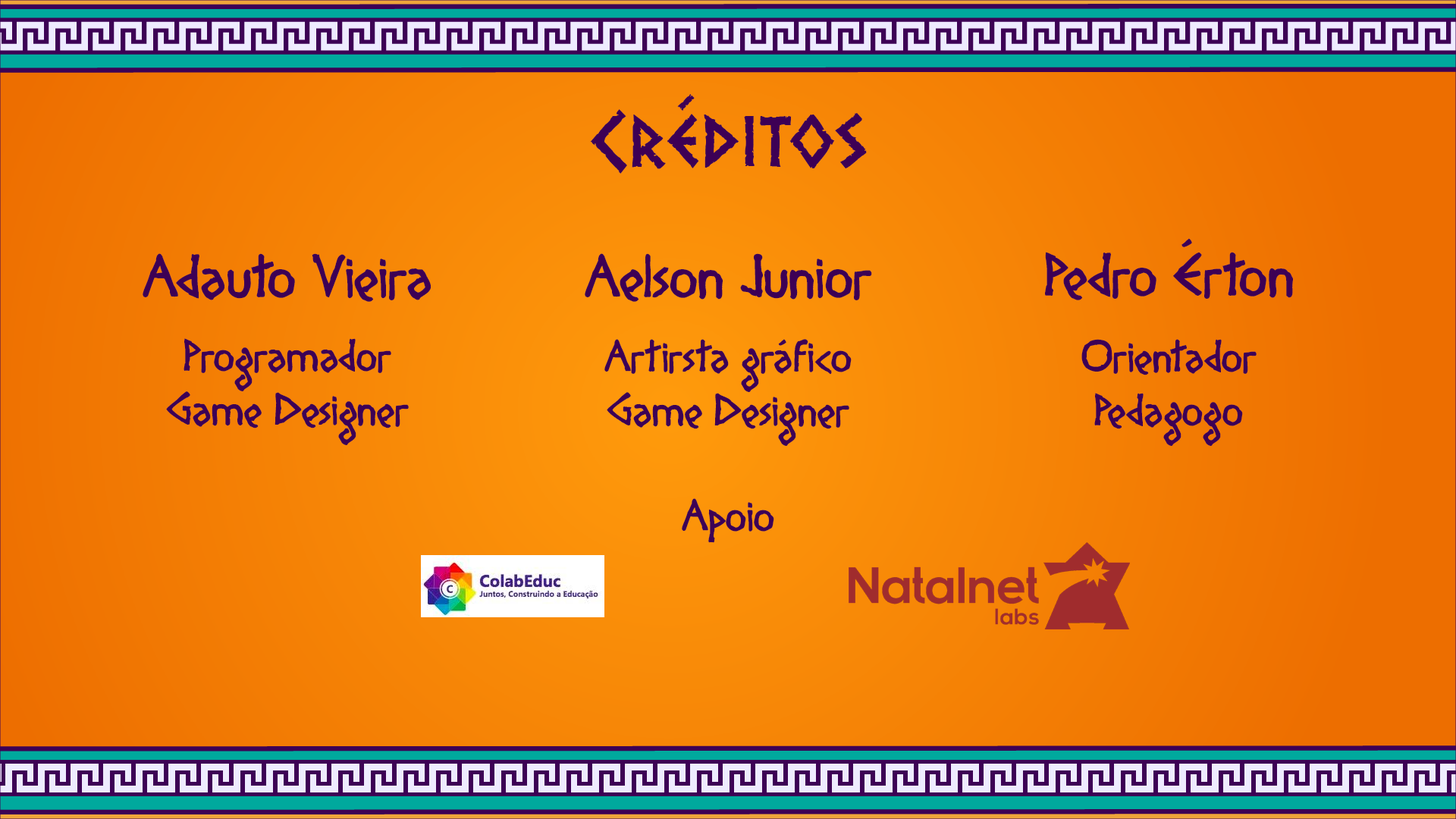
<style>
.page{position:relative;width:1456px;height:819px}
.page>*{position:absolute;margin:0}
.t1{font:70px "Dalek";color:#3d0055}
.t2{font:54.1px "Diogenes";color:#3d0055}
.t3{font:40.2px "Diogenes";color:#3d0055}
</style>
<div class="page">
<p class="t1" style="left:590px;top:94px;width:277px;height:80px">Créditos</p>
<p class="t2" style="left:1045px;top:238px;width:248px;height:62px">Pedro Érton</p>
<p class="t2" style="left:143px;top:253px;width:288px;height:49px">Adauto Vieira</p>
<p class="t2" style="left:585px;top:253px;width:287px;height:49px">Aelson Junior</p>
<p class="t3" style="left:184px;top:338px;width:207px;height:53px">Programador</p>
<p class="t3" style="left:604px;top:339px;width:248px;height:53px">Artirsta gráfico</p>
<p class="t3" style="left:1081px;top:339px;width:176px;height:36px">Orientador</p>
<p class="t3" style="left:166px;top:391px;width:243px;height:54px">Game Designer</p>
<p class="t3" style="left:607px;top:392px;width:242px;height:54px">Game Designer</p>
<p class="t3" style="left:1094px;top:393px;width:149px;height:53px">Pedagogo</p>
<p class="t3" style="left:682px;top:498px;width:92px;height:45px">Apoio</p>
</div>
